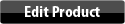
<style>
.page{position:relative;width:125px;height:24px;background:#4d4d4d}
.page>*{position:absolute;margin:0}
.t1{font:13.2px "KozGoPro-Heavy";color:#ffffff}
</style>
<div class="page">
<p class="t1" style="left:25px;top:6px;width:75px;height:11px">Edit Product</p>
</div>
